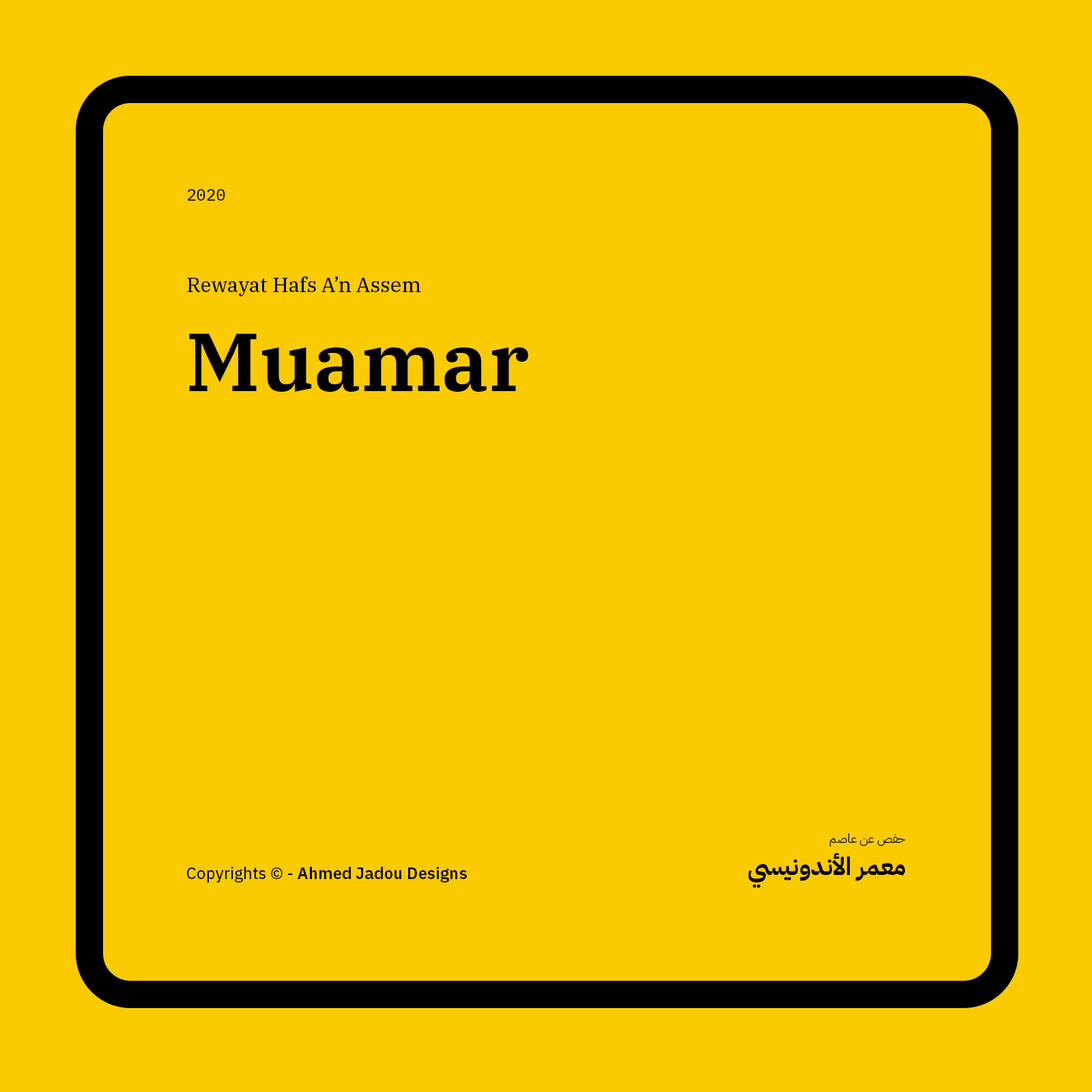
<style>
.page{position:relative;width:1092px;height:1092px;background:#facb00}
.page>*{position:absolute;margin:0}
.t1{font:16.4px "IBMPlexMono-Text";color:#000000}
.t2{font:20.5px "IBMPlexSerif-Text";color:#000000}
.t3{font:81.9px "IBMPlexSerif-SemiBold";color:#000000}
.t4{font:12.3px "IBMPlexArabic-Light";color:#000000}
.t5{font:24.6px "IBMPlexArabic-Bold";color:#000000}
.t6{font:16.4px "IBMPlexSans-SemiBold";color:#000000}
.t7{font:16.4px "IBMPlexSans-Text";color:#000000}
</style>
<div class="page">
<p class="t1" style="left:188px;top:189px;width:37px;height:12px">2020</p>
<p class="t2" style="left:187px;top:276px;width:233px;height:20px">Rewayat Hafs A’n Assem</p>
<p class="t3" style="left:189px;top:334px;width:339px;height:58px">Muamar</p>
<p class="t4" style="left:830px;top:833px;width:76px;height:14px">حفص عن عاصم</p>
<p class="t5" style="left:748px;top:852px;width:157px;height:36px">معمر الأندونيسي</p>
<p class="t6" style="left:187px;top:867px;width:280px;height:15px"><span class="t7">Copyrights © - </span>Ahmed Jadou Designs</p>
</div>
